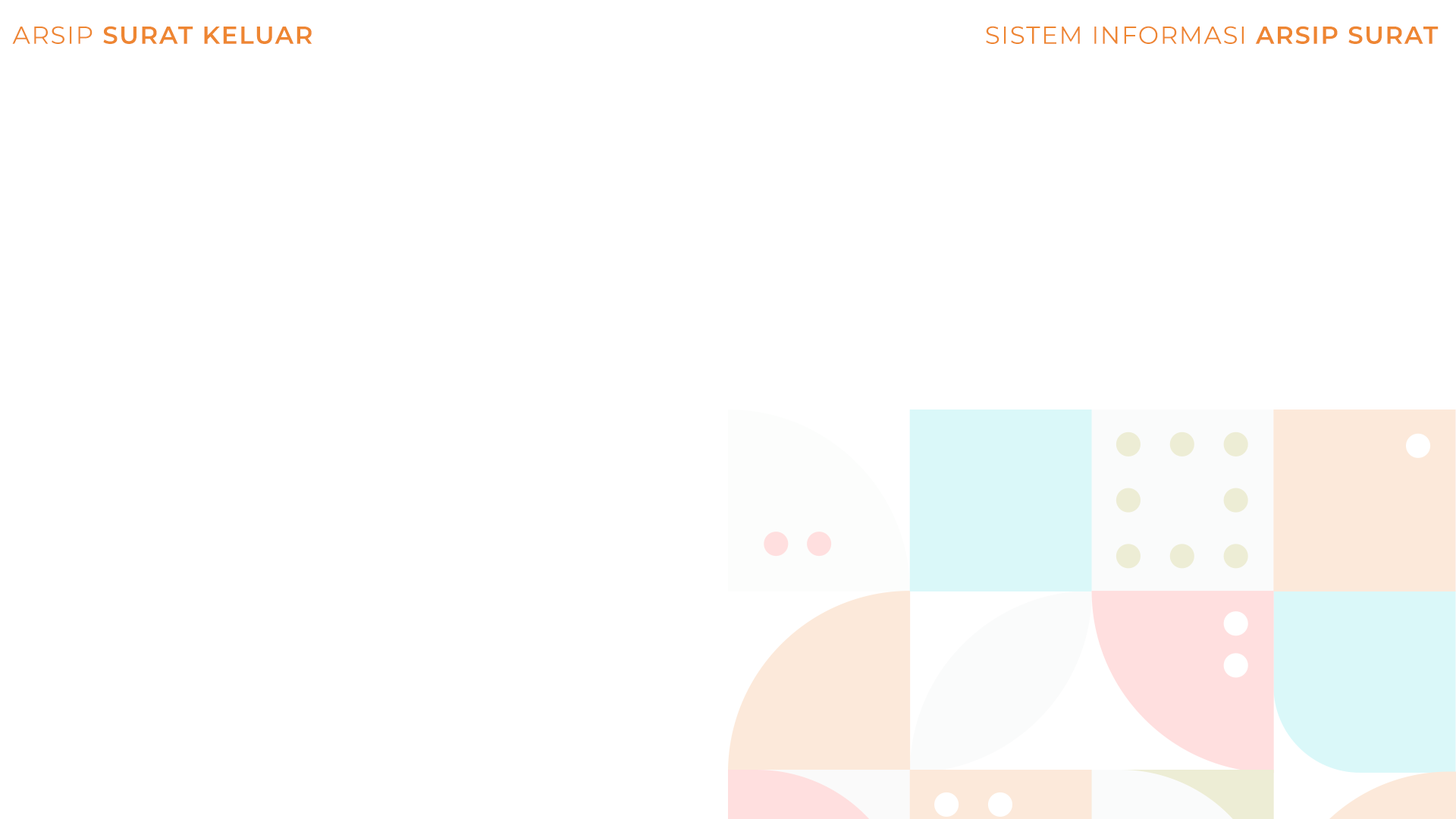
<style>
.page{position:relative;width:1456px;height:819px;background:#ffffff}
.page>*{position:absolute;margin:0}
.t1{font:24.6px "Montserrat-SemiBold";letter-spacing:0.05em;color:#ee8632}
.t2{font:24.6px "Montserrat-Regular";letter-spacing:0.05em;color:#ee8632}
</style>
<div class="page">
<p class="t1" style="left:12px;top:26px;width:300px;height:18px"><span class="t2">ARSIP</span> SURAT KELUAR</p>
<p class="t2" style="left:986px;top:26px;width:453px;height:18px">SISTEM INFORMASI<span class="t1"> ARSIP SURAT</span></p>
</div>
